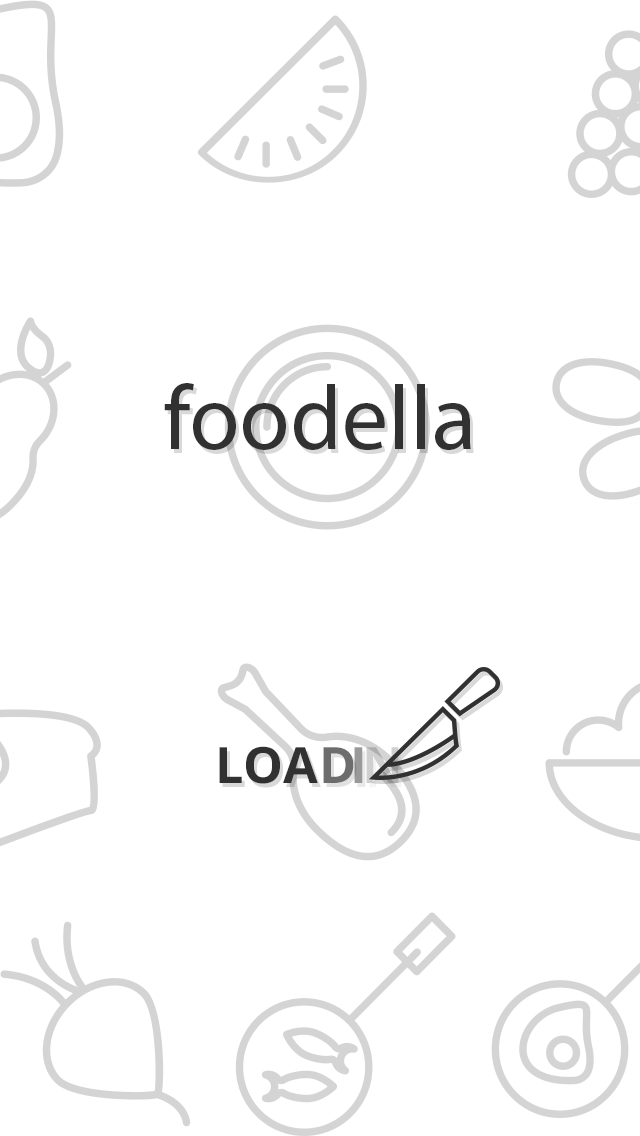
<style>
.page{position:relative;width:640px;height:1136px;background:#ffffff}
.page>*{position:absolute;margin:0}
.t1{font:92px "MyriadPro-Regular";color:#313131}
.t2{font:50px "OpenSans-Bold";color:#313131}
.t3{font:50px "OpenSans-Bold";color:#6d6d6d}
.t4{font:50px "OpenSans-Bold";color:#999999}
</style>
<div class="page">
<p class="t1" style="left:164px;top:383px;width:307px;height:67px">foodella</p>
<p class="t2" style="left:219px;top:746px;width:99px;height:38px">LOA</p>
<p class="t3" style="left:323px;top:747px;width:31px;height:36px">D</p>
<p class="t4" style="left:354px;top:747px;width:9px;height:36px">I</p>
</div>
